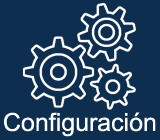
<style>
.page{position:relative;width:160px;height:140px;background:#0e2e4f}
.page>*{position:absolute;margin:0}
.t1{font:25px "ArialMT";color:#ffffff}
</style>
<div class="page">
<p class="t1" style="left:4px;top:112px;width:152px;height:25px">Configuración</p>
</div>
